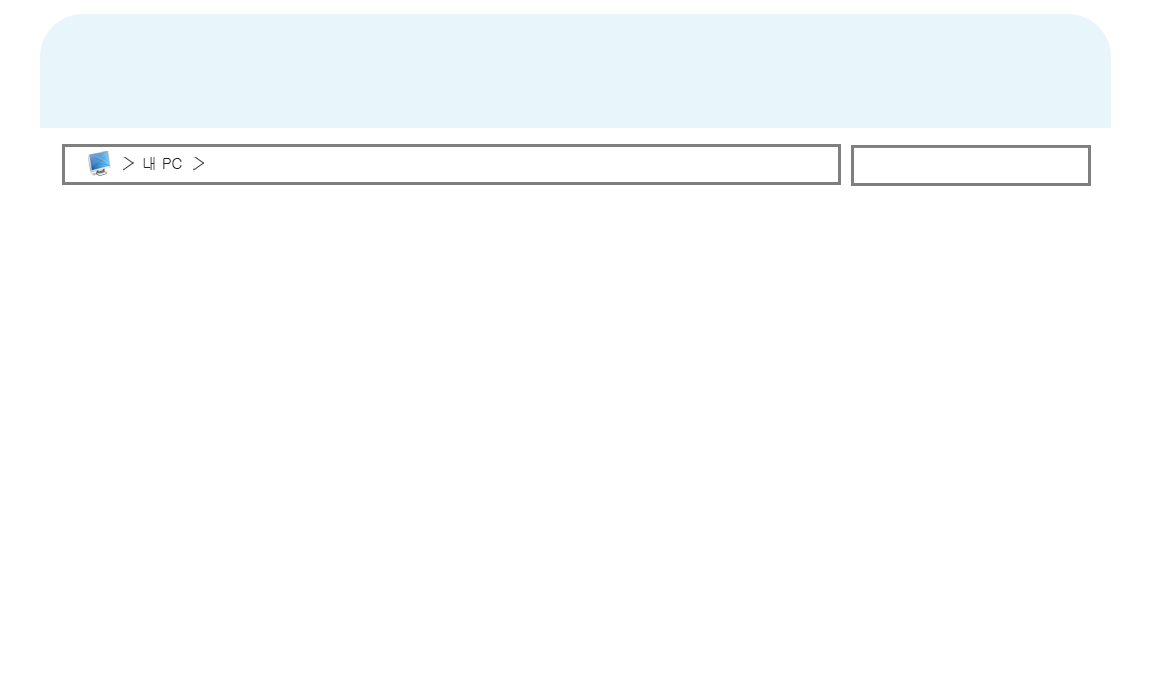
<style>
.page{position:relative;width:1150px;height:700px;background:#ffffff}
.page>*{position:absolute;margin:0}
.t1{font:15.1px "Gulim";color:#222020}
</style>
<div class="page">
<p class="t1" style="left:143px;top:157px;width:39px;height:13px">내 PC</p>
</div>
